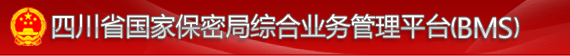
<style>
.page{position:relative;width:570px;height:56px}
.page>*{position:absolute;margin:0}
.t1{font:25px "MicrosoftYaHei";color:#f6f6f6}
.t2{font:23px "AgencyFB-Reg";letter-spacing:0.02em;color:#f6f6f6;font-weight:bold}
.t3{font:27px "MicrosoftYaHei";letter-spacing:0.02em;color:#f6f6f6}
</style>
<div class="page">
<p class="t1" style="left:52px;top:13px;width:467px;height:26px">四川省国家保密局综合业务管理平台<span class="t2">(</span><span class="t3">BMS</span><span class="t2">)</span></p>
</div>
